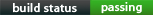
<style>
.page{position:relative;width:153px;height:15px}
.page>*{position:absolute;margin:0}
.t1{font:12.3px "MyriadPro-Regular";letter-spacing:0.01em;color:#ffffff;font-weight:bold}
</style>
<div class="page">
<p class="t1" style="left:13px;top:3px;width:64px;height:10px">build status</p>
<p class="t1" style="left:101px;top:2px;width:41px;height:12px">passing</p>
</div>
